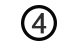
<style>
.page{position:relative;width:79px;height:48px;background:#ffffff}
.page>*{position:absolute;margin:0}
.t1{font:27.8px "ArialMT";color:#2e2e2e;font-weight:bold}
</style>
<div class="page">
<p class="t1" style="left:31px;top:13px;width:16px;height:21px">4</p>
</div>
